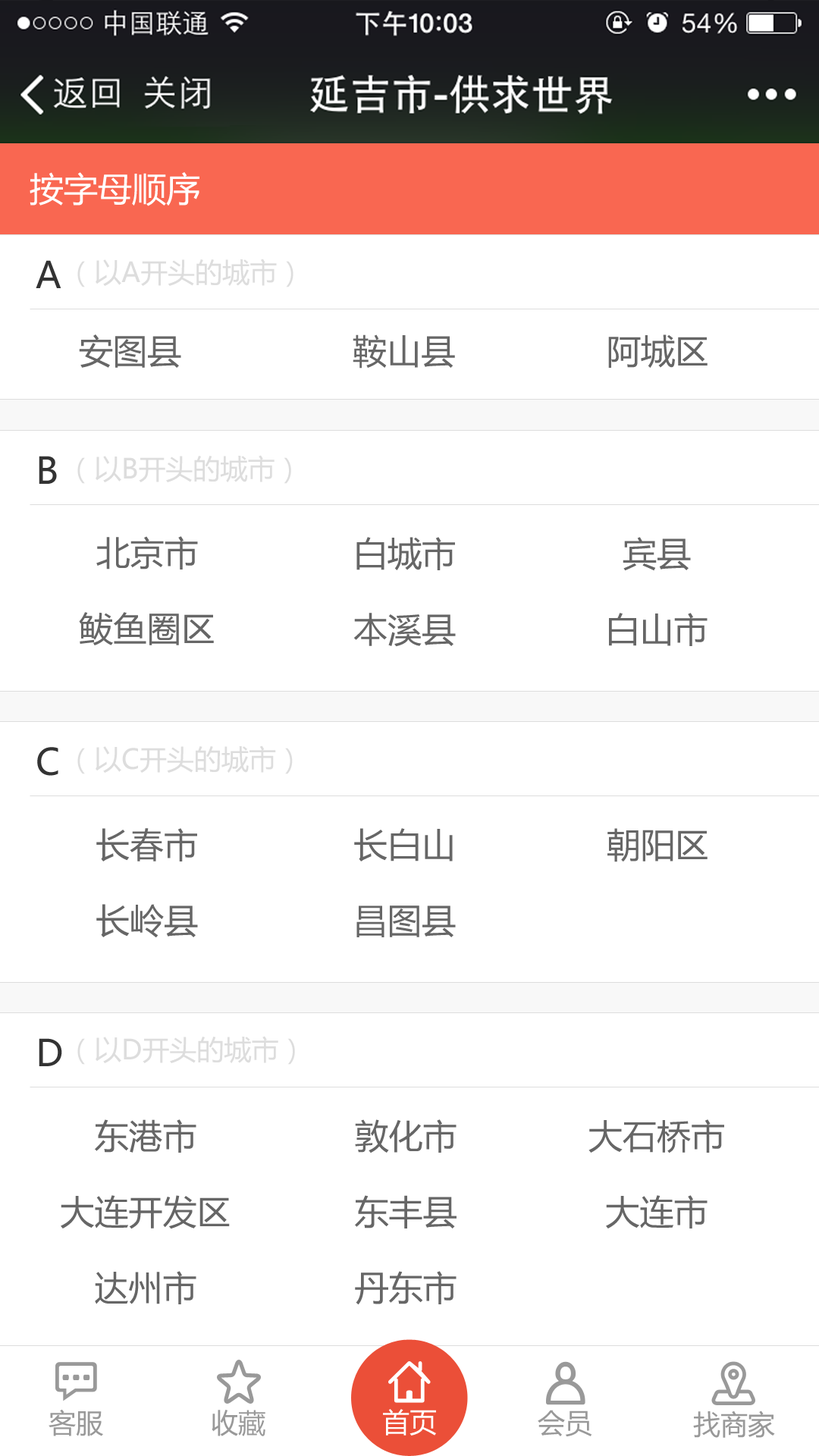
<style>
.page{position:relative;width:819px;height:1456px;background:#ffffff}
.page>*{position:absolute;margin:0}
.t1{font:34.1px "MicrosoftYaHei";color:#ffffff;text-transform:uppercase}
.t2{font:36.4px "MicrosoftYaHei";color:#333333;text-transform:uppercase}
.t3{font:27.3px "MicrosoftYaHei";color:#dddddd}
.t4{font:34.1px "MicrosoftYaHei";color:#666666}
.t5{font:34.1px/75.8px "MicrosoftYaHei";color:#666666}
.t6{font:27.3px "MicrosoftYaHei";color:#999999}
.t7{font:27.3px "MicrosoftYaHei";color:#ffffff}
</style>
<div class="page">
<p class="t1" style="left:30px;top:172px;width:169px;height:34px">按字母顺序</p>
<p class="t2" style="left:36px;top:260px;width:25px;height:28px">A</p>
<p class="t3" style="left:77px;top:259px;width:216px;height:28px">（以A开头的城市）</p>
<p class="t4" style="left:79px;top:334px;width:629px;height:35px">安图县                 鞍山县               阿城区</p>
<p class="t2" style="left:39px;top:456px;width:18px;height:28px">B</p>
<p class="t3" style="left:77px;top:455px;width:214px;height:29px">（以B开头的城市）</p>
<p class="t5" style="left:79px;top:536px;width:135px;height:109px;text-align:center">北京市<br>鲅鱼圈区</p>
<p class="t5" style="left:353px;top:537px;width:103px;height:110px">白城市<br>本溪县</p>
<p class="t5" style="left:609px;top:537px;width:99px;height:109px;text-align:center">宾县<br>白山市</p>
<p class="t2" style="left:37px;top:747px;width:21px;height:29px">C</p>
<p class="t3" style="left:77px;top:745px;width:216px;height:29px">（以C开头的城市）</p>
<p class="t5" style="left:96px;top:828px;width:102px;height:110px">长春市<br>长岭县</p>
<p class="t5" style="left:354px;top:828px;width:102px;height:109px">长白山<br>昌图县</p>
<p class="t4" style="left:607px;top:828px;width:101px;height:34px">朝阳区</p>
<p class="t3" style="left:77px;top:1036px;width:218px;height:29px">（以D开头的城市）</p>
<p class="t2" style="left:39px;top:1038px;width:23px;height:28px">D</p>
<p class="t5" style="left:61px;top:1119px;width:169px;height:185px;text-align:center">东港市<br>大连开发区<br>达州市</p>
<p class="t5" style="left:355px;top:1119px;width:102px;height:186px;text-align:center">敦化市<br>东丰县<br>丹东市</p>
<p class="t5" style="left:588px;top:1119px;width:136px;height:109px;text-align:center">大石桥市<br>大连市</p>
<p class="t6" style="left:49px;top:1409px;width:54px;height:27px">客服</p>
<p class="t6" style="left:212px;top:1410px;width:53px;height:26px">收藏</p>
<p class="t7" style="left:383px;top:1409px;width:53px;height:27px">首页</p>
<p class="t6" style="left:538px;top:1410px;width:54px;height:27px">会员</p>
<p class="t6" style="left:693px;top:1410px;width:82px;height:28px">找商家</p>
</div>
